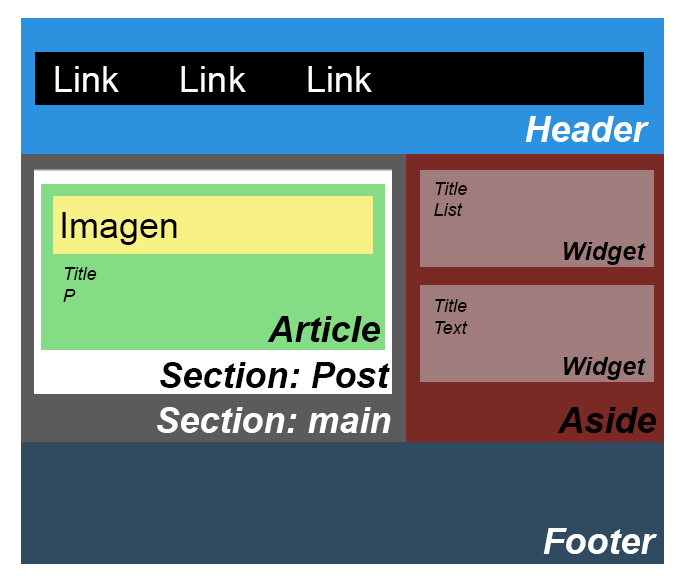
<style>
.page{position:relative;width:683px;height:583px}
.page>*{position:absolute;margin:0}
.t1{font:36px "ArialMT";color:#ffffff}
.t2{font:36px "Arial-BoldItalicMT";color:#ffffff}
.t3{font:18px "Arial-ItalicMT";color:#000000}
.t4{font:36px "ArialMT";color:#000000}
.t5{font:25px "Arial-BoldItalicMT";color:#000000}
.t6{font:36px "Arial-BoldItalicMT";color:#000000}
</style>
<div class="page">
<p class="t1" style="left:55px;top:66px;width:317px;height:26px">Link      Link      Link</p>
<p class="t2" style="left:525px;top:116px;width:124px;height:26px">Header</p>
<p class="t3" style="left:434px;top:182px;width:33px;height:34px">Title<br>List</p>
<p class="t4" style="left:62px;top:212px;width:115px;height:33px">Imagen</p>
<p class="t5" style="left:564px;top:242px;width:82px;height:23px">Widget</p>
<p class="t3" style="left:63px;top:267px;width:34px;height:35px">Title<br>P</p>
<p class="t3" style="left:435px;top:299px;width:33px;height:35px">Title<br>Text</p>
<p class="t6" style="left:267px;top:316px;width:113px;height:26px">Article</p>
<p class="t6" style="left:160px;top:362px;width:230px;height:26px">Section: Post</p>
<p class="t5" style="left:564px;top:357px;width:82px;height:23px">Widget</p>
<p class="t2" style="left:157px;top:407px;width:234px;height:26px">Section: main</p>
<p class="t6" style="left:557px;top:407px;width:99px;height:26px">Aside</p>
<p class="t2" style="left:543px;top:528px;width:114px;height:26px">Footer</p>
</div>
